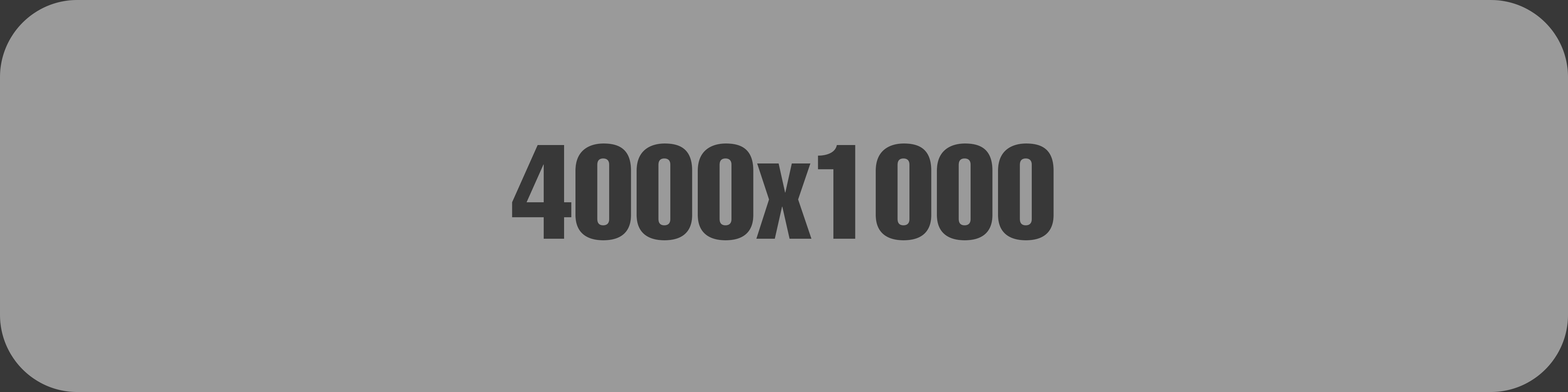
<style>
.page{position:relative;width:1568px;height:392px;background:#9a9a9a}
.page>*{position:absolute;margin:0}
.t1{font:131.7px "Helvetica-Compressed";color:#383838}
</style>
<div class="page">
<p class="t1" style="left:512px;top:143px;width:542px;height:97px">4000x1000</p>
</div>
